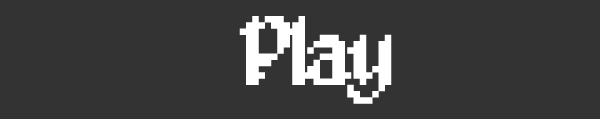
<style>
.page{position:relative;width:600px;height:119px;background:#333333}
.page>*{position:absolute;margin:0}
.t1{font:100px "Alagard";letter-spacing:-0.1em;color:#ffffff}
</style>
<div class="page">
<p class="t1" style="left:239px;top:16px;width:153px;height:88px">Play</p>
</div>
